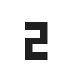
<style>
.page{position:relative;width:74px;height:74px;background:#ffffff}
.page>*{position:absolute;margin:0}
.t1{font:60px "04b24";color:#1f1f1f}
</style>
<div class="page">
<p class="t1" style="left:25px;top:22px;width:23px;height:38px">2</p>
</div>
